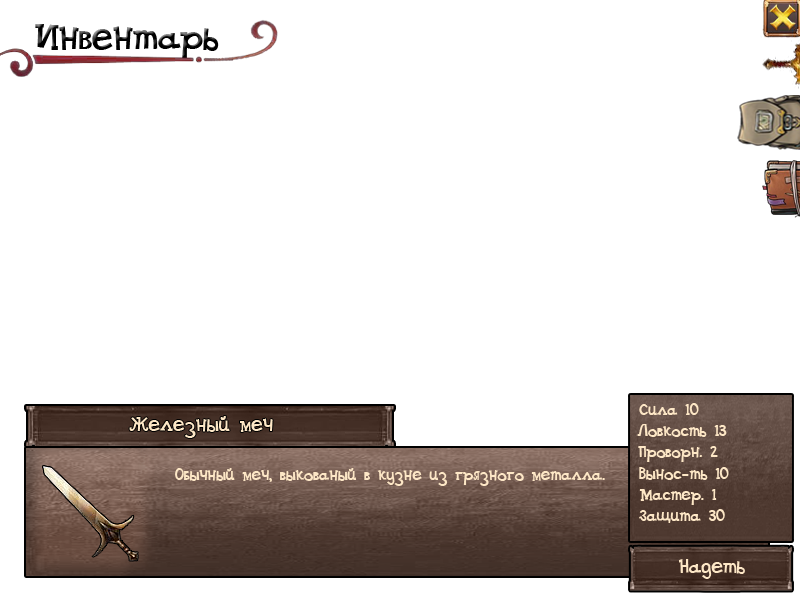
<style>
.page{position:relative;width:800px;height:600px;background:#ffffff}
.page>*{position:absolute;margin:0}
.t1{font:36px "DSGoose";color:#000000}
.t2{font:16px "DSGoose";color:#fde7c6}
.t3{font:20px "DSGoose";color:#fde7c6}
</style>
<div class="page">
<p class="t1" style="left:35px;top:24px;width:184px;height:36px">Инвентарь</p>
<p class="t2" style="left:639px;top:403px;width:60px;height:12px">Сила 10</p>
<p class="t3" style="left:129px;top:416px;width:144px;height:22px">Железный меч</p>
<p class="t2" style="left:637px;top:424px;width:90px;height:13px">Ловкость 13</p>
<p class="t2" style="left:638px;top:446px;width:80px;height:16px">Проворн. 2</p>
<p class="t2" style="left:175px;top:468px;width:430px;height:18px">Обычный меч, выкованый в кузне из грязного металла.</p>
<p class="t2" style="left:639px;top:467px;width:90px;height:13px">Вынос-ть 10</p>
<p class="t2" style="left:639px;top:489px;width:78px;height:16px">Мастер. 1</p>
<p class="t2" style="left:639px;top:509px;width:86px;height:14px">Защита 30</p>
<p class="t3" style="left:679px;top:559px;width:66px;height:20px">Надеть</p>
</div>
